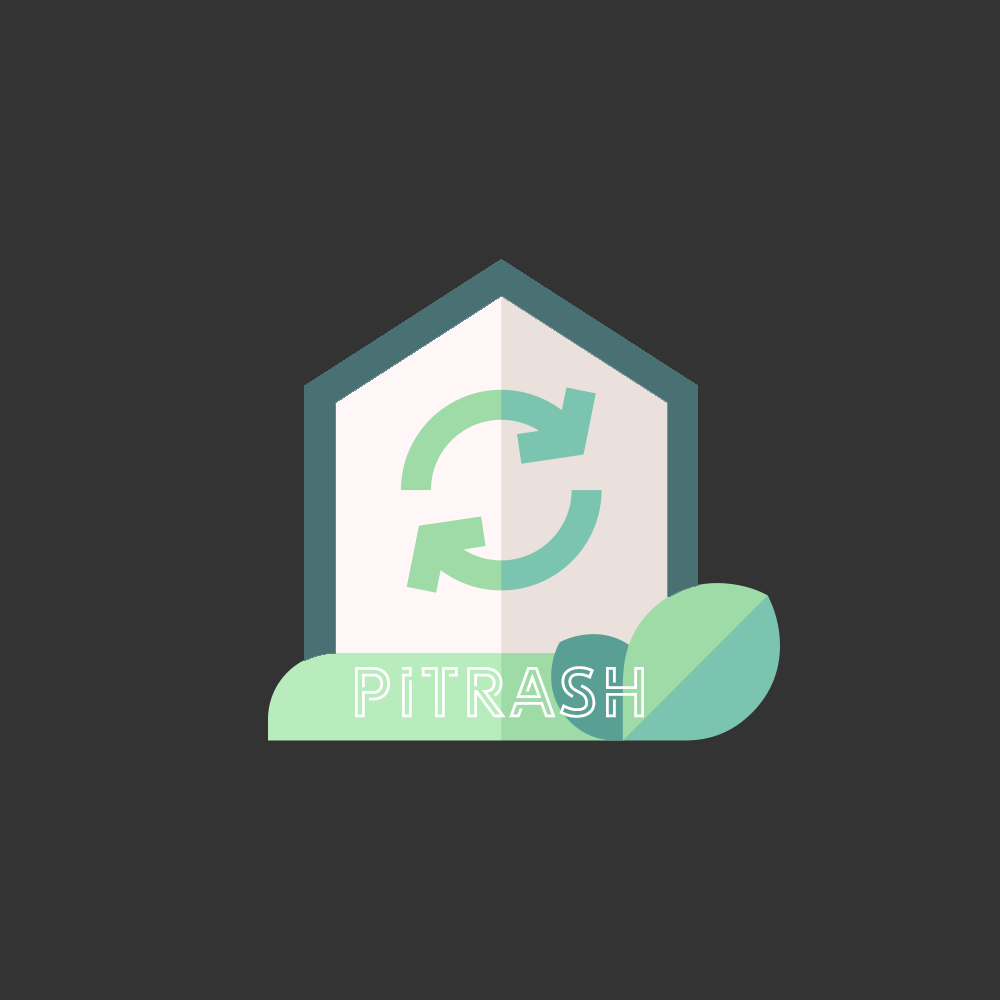
<style>
.page{position:relative;width:1000px;height:1000px;background:#333333}
.page>*{position:absolute;margin:0}
.t1{font:67px "LIBRARY3AM";color:#ffffff}
</style>
<div class="page">
<p class="t1" style="left:355px;top:666px;width:289px;height:52px">Pitrash</p>
</div>
